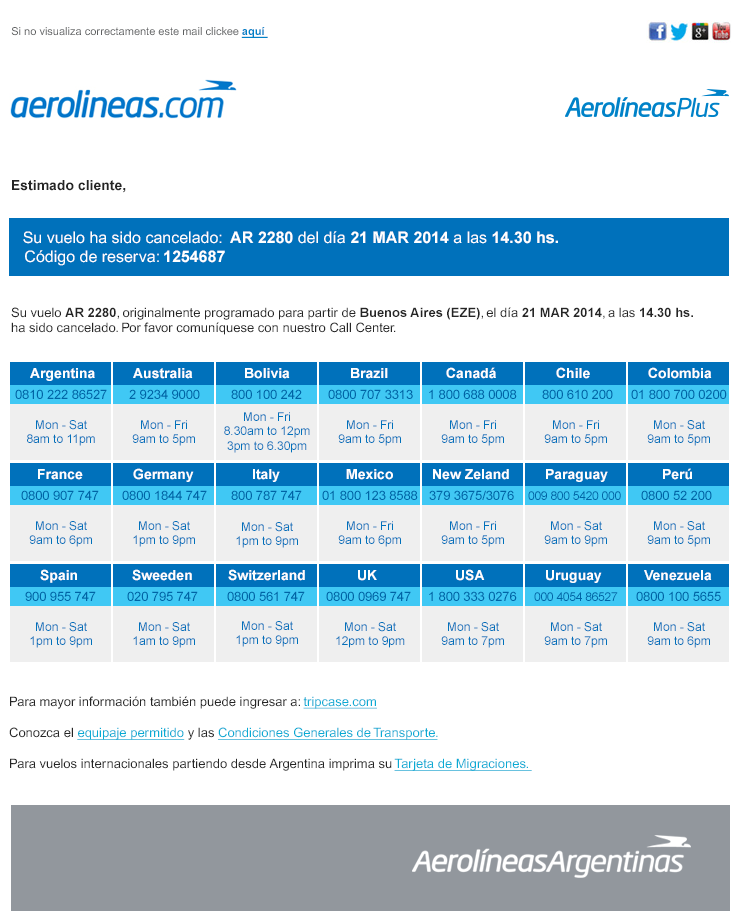
<style>
.page{position:relative;width:740px;height:922px;background:#ffffff}
.page>*{position:absolute;margin:0}
.t1{font:11px "ArialMT";color:#5e6061}
.t2{font:11px "Arial-BoldMT";color:#0082c8;text-decoration:underline}
.t3{font:13px "ArialMT";color:#252525}
.t4{font:14px "Arial-BoldMT";color:#252525}
.t5{font:16px "ArialMT";color:#ffffff}
.t6{font:16px "Arial-BoldMT";color:#ffffff}
.t7{font:13px "Arial-BoldMT";color:#252525}
.t8{font:14px "Arial-BoldMT";color:#ffffff}
.t9{font:13px "ArialMT";letter-spacing:-0.01em;color:#0064a6}
.t10{font:12px "ArialMT";color:#0071bb}
.t11{font:12px "ArialMT";letter-spacing:-0.02em;color:#0064a6}
.t12{font:13px "ArialMT";color:#08abd4;text-decoration:underline}
</style>
<div class="page">
<p class="t1" style="left:11px;top:27px;width:257px;height:11px">Si no visualiza correctamente este mail clickee <span class="t2">aquí</span></p>
<p class="t3" style="left:11px;top:180px;width:682px;height:155px"><span class="t4">Estimado cliente, <br><br><br>   </span><span class="t5">Su vuelo ha sido cancelado:  </span><span class="t6">AR 2280 </span><span class="t5">del día </span><span class="t6">21 MAR 2014</span><span class="t5"> a las </span><span class="t6">14.30 hs.<br></span><span class="t5">   Código de reserva: </span><span class="t6">1254687 <br><br></span><br><br>Su vuelo <span class="t7">AR 2280</span>, originalmente programado para partir de <span class="t7">Buenos Aires (EZE)</span>, el día <span class="t7">21 MAR 2014</span>, a las <span class="t7">14.30 hs.<br></span>ha sido cancelado. Por favor comuníquese con nuestro Call Center.</p>
<p class="t8" style="left:30px;top:368px;width:65px;height:13px">Argentina</p>
<p class="t8" style="left:133px;top:368px;width:60px;height:11px">Australia</p>
<p class="t8" style="left:245px;top:368px;width:45px;height:11px">Bolivia</p>
<p class="t8" style="left:351px;top:368px;width:37px;height:11px">Brazil</p>
<p class="t8" style="left:446px;top:367px;width:50px;height:12px">Canadá</p>
<p class="t8" style="left:556px;top:367px;width:34px;height:12px">Chile</p>
<p class="t8" style="left:648px;top:367px;width:64px;height:12px">Colombia</p>
<p class="t9" style="left:15px;top:389px;width:92px;height:10px">0810 222 86527</p>
<p class="t9" style="left:129px;top:389px;width:71px;height:10px">2 9234 9000</p>
<p class="t9" style="left:231px;top:389px;width:71px;height:10px">800 100 242</p>
<p class="t9" style="left:328px;top:389px;width:85px;height:10px">0800 707 3313</p>
<p class="t9" style="left:429px;top:389px;width:88px;height:10px">1 800 688 0008</p>
<p class="t9" style="left:542px;top:389px;width:71px;height:10px">800 610 200</p>
<p class="t9" style="left:631px;top:389px;width:96px;height:10px">01 800 700 0200</p>
<p class="t10" style="left:224px;top:412px;width:86px;height:41px;text-align:center">Mon - Fri<br>8.30am to 12pm<br>3pm to 6.30pm</p>
<p class="t10" style="left:27px;top:420px;width:68px;height:26px;text-align:center">Mon - Sat<br>8am to 11pm</p>
<p class="t10" style="left:132px;top:420px;width:63px;height:26px;text-align:center">Mon - Fri<br>9am to 5pm</p>
<p class="t10" style="left:338px;top:420px;width:63px;height:26px;text-align:center">Mon - Fri<br>9am to 5pm</p>
<p class="t10" style="left:441px;top:420px;width:63px;height:26px;text-align:center">Mon - Fri<br>9am to 5pm</p>
<p class="t10" style="left:544px;top:420px;width:63px;height:26px;text-align:center">Mon - Fri<br>9am to 5pm</p>
<p class="t10" style="left:647px;top:420px;width:63px;height:26px;text-align:center">Mon - Sat<br>9am to 5pm</p>
<p class="t8" style="left:38px;top:469px;width:45px;height:11px">France</p>
<p class="t8" style="left:133px;top:468px;width:61px;height:14px">Germany</p>
<p class="t8" style="left:253px;top:469px;width:27px;height:13px">Italy</p>
<p class="t8" style="left:346px;top:469px;width:47px;height:11px">Mexico</p>
<p class="t8" style="left:433px;top:469px;width:76px;height:11px">New Zeland</p>
<p class="t8" style="left:546px;top:469px;width:62px;height:13px">Paraguay</p>
<p class="t8" style="left:663px;top:468px;width:29px;height:12px">Perú</p>
<p class="t9" style="left:21px;top:490px;width:78px;height:10px">0800 907 747</p>
<p class="t9" style="left:122px;top:490px;width:85px;height:10px">0800 1844 747</p>
<p class="t9" style="left:231px;top:490px;width:71px;height:10px">800 787 747</p>
<p class="t9" style="left:322px;top:490px;width:96px;height:10px">01 800 123 8588</p>
<p class="t9" style="left:429px;top:490px;width:85px;height:10px">379 3675/3076</p>
<p class="t11" style="left:528px;top:491px;width:93px;height:9px">009 800 5420 000</p>
<p class="t9" style="left:641px;top:490px;width:71px;height:10px">0800 52 200</p>
<p class="t10" style="left:29px;top:521px;width:63px;height:26px;text-align:center">Mon - Sat<br>9am to 6pm</p>
<p class="t10" style="left:133px;top:521px;width:62px;height:26px;text-align:center">Mon - Sat<br>1pm to 9pm</p>
<p class="t10" style="left:338px;top:521px;width:63px;height:26px;text-align:center">Mon - Fri<br>9am to 6pm</p>
<p class="t10" style="left:441px;top:521px;width:63px;height:26px;text-align:center">Mon - Fri<br>9am to 5pm</p>
<p class="t10" style="left:544px;top:521px;width:63px;height:26px;text-align:center">Mon - Sat<br>9am to 9pm</p>
<p class="t10" style="left:647px;top:521px;width:63px;height:26px;text-align:center">Mon - Sat<br>9am to 5pm</p>
<p class="t10" style="left:236px;top:522px;width:62px;height:26px;text-align:center">Mon - Sat<br>1pm to 9pm</p>
<p class="t8" style="left:40px;top:569px;width:37px;height:14px">Spain</p>
<p class="t8" style="left:132px;top:569px;width:60px;height:12px">Sweeden</p>
<p class="t8" style="left:228px;top:569px;width:77px;height:12px">Switzerland</p>
<p class="t8" style="left:456px;top:569px;width:29px;height:12px">USA</p>
<p class="t8" style="left:358px;top:570px;width:19px;height:11px">UK</p>
<p class="t8" style="left:546px;top:570px;width:56px;height:13px">Uruguay</p>
<p class="t8" style="left:644px;top:570px;width:68px;height:11px">Venezuela</p>
<p class="t9" style="left:25px;top:591px;width:71px;height:10px">900 955 747</p>
<p class="t9" style="left:127px;top:591px;width:71px;height:10px">020 795 747</p>
<p class="t9" style="left:227px;top:591px;width:78px;height:10px">0800 561 747</p>
<p class="t9" style="left:326px;top:591px;width:85px;height:10px">0800 0969 747</p>
<p class="t9" style="left:429px;top:591px;width:88px;height:10px">1 800 333 0276</p>
<p class="t11" style="left:534px;top:592px;width:84px;height:9px">000 4054 86527</p>
<p class="t9" style="left:636px;top:591px;width:85px;height:10px">0800 100 5655</p>
<p class="t10" style="left:30px;top:622px;width:62px;height:26px;text-align:center">Mon - Sat<br>1pm to 9pm</p>
<p class="t10" style="left:133px;top:622px;width:62px;height:26px;text-align:center">Mon - Sat<br>1am to 9pm</p>
<p class="t10" style="left:236px;top:621px;width:62px;height:26px;text-align:center">Mon - Sat<br>1pm to 9pm</p>
<p class="t10" style="left:336px;top:622px;width:69px;height:26px;text-align:center">Mon - Sat<br>12pm to 9pm</p>
<p class="t10" style="left:441px;top:622px;width:63px;height:26px;text-align:center">Mon - Sat<br>9am to 7pm</p>
<p class="t10" style="left:544px;top:622px;width:63px;height:26px;text-align:center">Mon - Sat<br>9am to 7pm</p>
<p class="t10" style="left:647px;top:622px;width:63px;height:26px;text-align:center">Mon - Sat<br>9am to 6pm</p>
<p class="t3" style="left:9px;top:696px;width:523px;height:75px">Para mayor información también puede ingresar a: <span class="t12">tripcase.com<br><br></span>Conozca el <span class="t12">equipaje permitido </span>y las <span class="t12">Condiciones Generales de Transporte.<br><br></span>Para vuelos internacionales partiendo desde Argentina imprima su <span class="t12">Tarjeta de Migraciones.</span></p>
</div>
